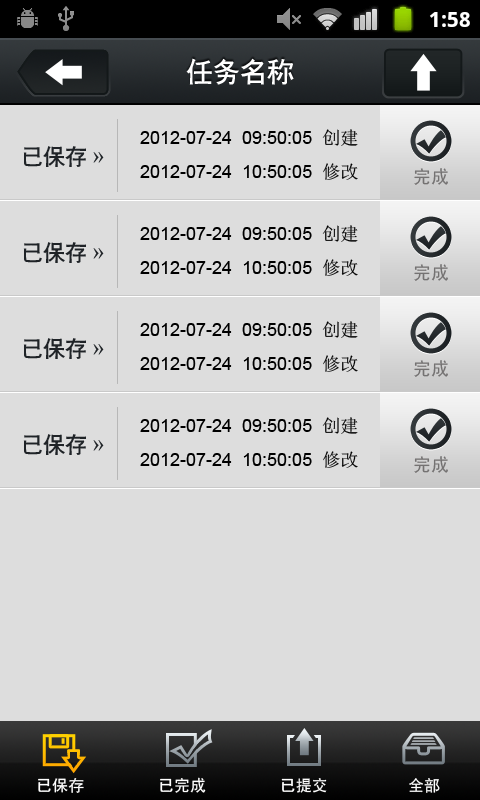
<style>
.page{position:relative;width:480px;height:800px;background:#dddddd}
.page>*{position:absolute;margin:0}
.t1{font:27px "CTCuHeiSJ";color:#ffffff}
.t2{font:18px "ArialMT";color:#000000}
.t3{font:18px "SimSun";color:#000000}
.t4{font:22px "CTCuHeiSJ";color:#1f2327}
.t5{font:22px "SimSun";color:#1f2327}
.t6{font:18px "SimHei";color:#747272}
.t7{font:16px "SimHei";color:#ffffff}
</style>
<div class="page">
<p class="t1" style="left:186px;top:58px;width:108px;height:27px">任务名称</p>
<p class="t2" style="left:140px;top:129px;width:218px;height:17px">2012-07-24  09:50:05  <span class="t3">创建</span></p>
<p class="t4" style="left:23px;top:146px;width:81px;height:21px">已保存 <span class="t5">»</span></p>
<p class="t2" style="left:140px;top:163px;width:218px;height:17px">2012-07-24  10:50:05  <span class="t3">修改</span></p>
<p class="t6" style="left:414px;top:168px;width:34px;height:17px">完成</p>
<p class="t2" style="left:140px;top:225px;width:218px;height:17px">2012-07-24  09:50:05  <span class="t3">创建</span></p>
<p class="t4" style="left:23px;top:242px;width:81px;height:21px">已保存 <span class="t5">»</span></p>
<p class="t2" style="left:140px;top:259px;width:218px;height:17px">2012-07-24  10:50:05  <span class="t3">修改</span></p>
<p class="t6" style="left:414px;top:264px;width:34px;height:17px">完成</p>
<p class="t2" style="left:140px;top:321px;width:218px;height:17px">2012-07-24  09:50:05  <span class="t3">创建</span></p>
<p class="t4" style="left:23px;top:338px;width:81px;height:21px">已保存 <span class="t5">»</span></p>
<p class="t2" style="left:140px;top:355px;width:218px;height:17px">2012-07-24  10:50:05  <span class="t3">修改</span></p>
<p class="t6" style="left:414px;top:360px;width:34px;height:17px">完成</p>
<p class="t2" style="left:140px;top:417px;width:218px;height:17px">2012-07-24  09:50:05  <span class="t3">创建</span></p>
<p class="t4" style="left:23px;top:434px;width:81px;height:21px">已保存 <span class="t5">»</span></p>
<p class="t2" style="left:140px;top:451px;width:218px;height:17px">2012-07-24  10:50:05  <span class="t3">修改</span></p>
<p class="t6" style="left:414px;top:456px;width:34px;height:17px">完成</p>
<p class="t7" style="left:38px;top:778px;width:46px;height:15px">已保存</p>
<p class="t7" style="left:160px;top:777px;width:46px;height:16px">已完成</p>
<p class="t7" style="left:281px;top:778px;width:46px;height:15px">已提交</p>
<p class="t7" style="left:409px;top:778px;width:31px;height:15px">全部</p>
</div>
